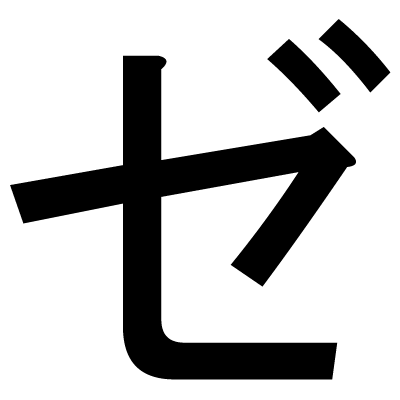
<style>
.page{position:relative;width:400px;height:400px;background:#ffffff}
.page>*{position:absolute;margin:0}
.t1{font:424.8px "MS-PGothic";color:#000000}
</style>
<div class="page">
<p class="t1" style="left:10px;top:19px;width:381px;height:361px">ゼ</p>
</div>
